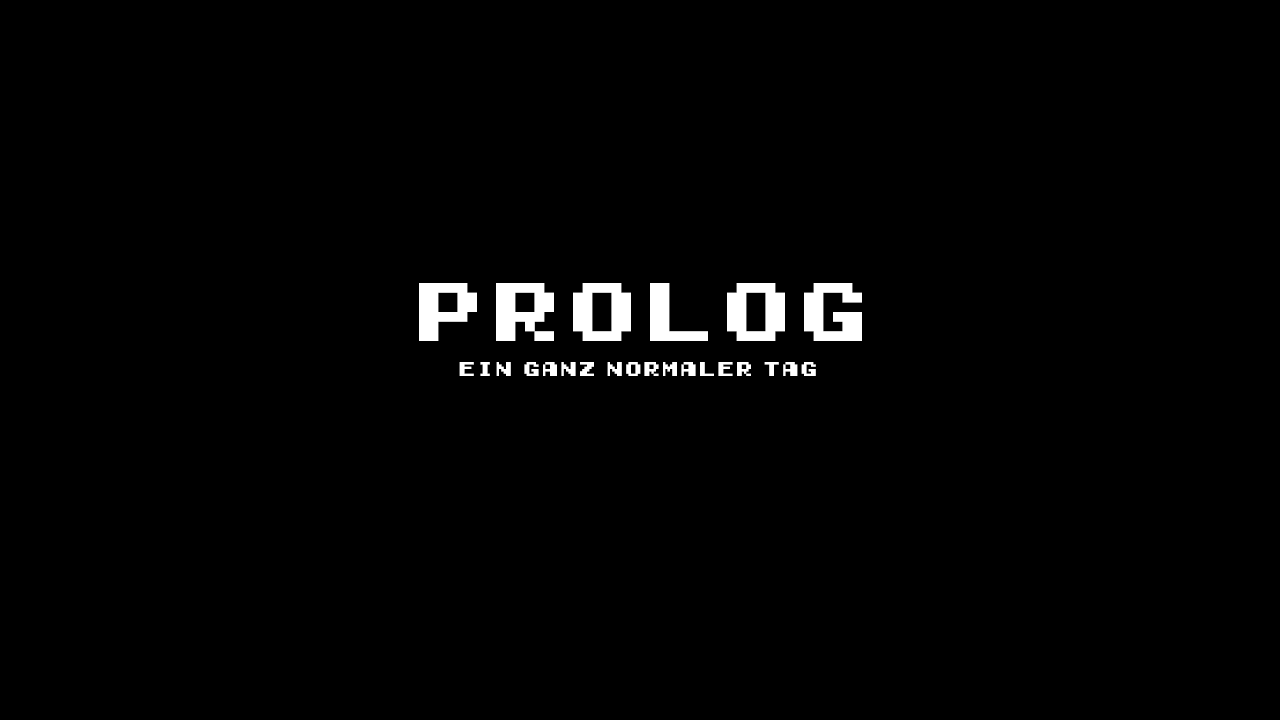
<style>
.page{position:relative;width:1280px;height:720px;background:#000000}
.page>*{position:absolute;margin:0}
.t1{font:77.1px "Early-GameBoy";color:#ffffff}
.t2{font:18.5px "Early-GameBoy";color:#ffffff}
</style>
<div class="page">
<p class="t1" style="left:419px;top:283px;width:443px;height:58px">PROLOG</p>
<p class="t2" style="left:459px;top:362px;width:357px;height:14px">Ein ganz normaler Tag</p>
</div>
